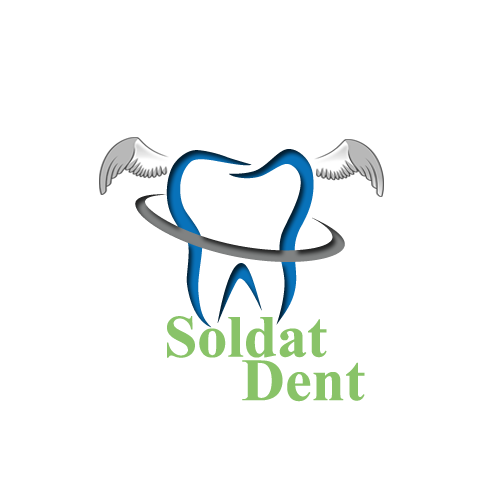
<style>
.page{position:relative;width:500px;height:500px;background:#ffffff}
.page>*{position:absolute;margin:0}
.t1{font:59.8px "TimesNewRomanPS-BoldMT";color:#89c368}
.t2{font:60px "TimesNewRomanPS-BoldMT";color:#89c368}
</style>
<div class="page">
<p class="t1" style="left:167px;top:316px;width:160px;height:42px">Soldat</p>
<p class="t2" style="left:242px;top:360px;width:123px;height:42px">Dent</p>
</div>
